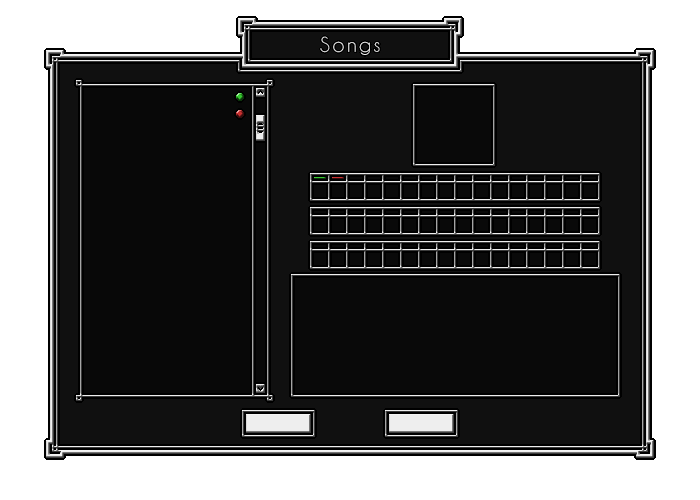
<style>
.page{position:relative;width:700px;height:500px;background:#ffffff}
.page>*{position:absolute;margin:0}
.t1{font:22px "Champagne&Limousines";letter-spacing:0.12em;color:#eeeeee}
</style>
<div class="page">
<p class="t1" style="left:320px;top:36px;width:60px;height:19px">Songs</p>
</div>
